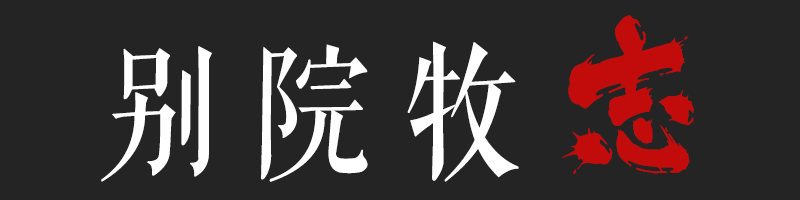
<style>
.page{position:relative;width:800px;height:200px;background:#242424}
.page>*{position:absolute;margin:0}
.t1{font:144px "FZQKBYSJW--GB1-0";letter-spacing:0.261em;color:#ffffff;scale:0.83 1}
.t2{font:180px "Ohhige115";letter-spacing:0.261em;color:#c20c0c;scale:0.83 1}
</style>
<div class="page">
<p class="t1" style="left:101px;top:15px;width:593px;height:167px">别院牧<span class="t2">志</span></p>
</div>
